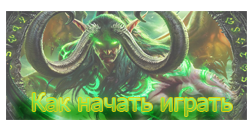
<style>
.page{position:relative;width:247px;height:120px}
.page>*{position:absolute;margin:0}
.t1{font:24px "Tahoma"}
</style>
<div class="page">
<p class="t1" style="left:32px;top:93px;width:200px;height:23px">Как начать играть</p>
</div>
